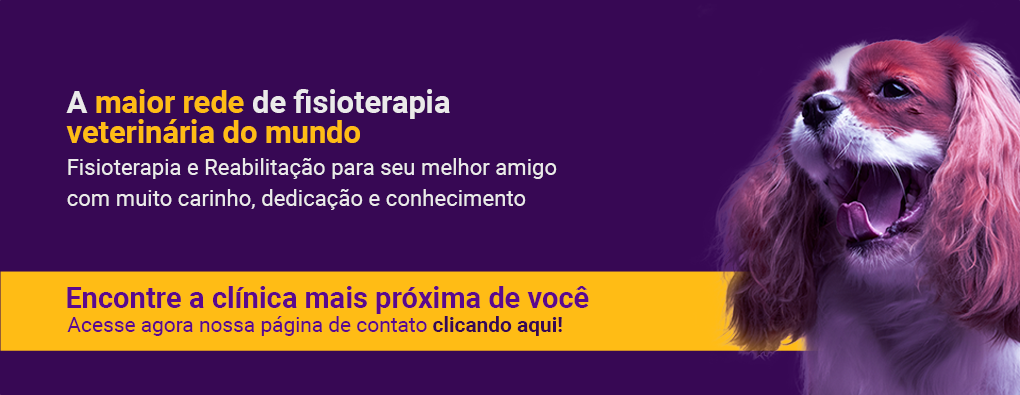
<style>
.page{position:relative;width:1020px;height:395px;background:#370854}
.page>*{position:absolute;margin:0}
.t1{font:30.8px/30.8px "Roboto-Bold";color:#ffbc15}
.t2{font:30.8px/30.8px "Roboto-Bold";color:#ebeaea}
.t3{font:22.2px/30.8px "Roboto-Regular";color:#ebeaea}
.t4{font:29.1px "Roboto-Bold";color:#5b098d}
.t5{font:20.9px "Roboto-Regular";color:#5b098d}
.t6{font:20.9px "Roboto-Bold";color:#370854}
</style>
<div class="page">
<p class="t1" style="left:66px;top:89px;width:384px;height:54px"><span class="t2">A </span>maior rede<span class="t2"> de fisioterapia<br></span>veterinária do mundo</p>
<p class="t3" style="left:67px;top:158px;width:490px;height:52px">Fisioterapia e Reabilitação para seu melhor amigo<br>com muito carinho, dedicação e conhecimento</p>
<p class="t4" style="left:67px;top:286px;width:522px;height:28px">Encontre a clínica mais próxima de você</p>
<p class="t5" style="left:67px;top:316px;width:495px;height:20px">Acesse agora nossa página de contato <span class="t6">clicando aqui!</span></p>
</div>
